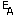
<style>
.page{position:relative;width:16px;height:16px;background:#ffffff}
.page>*{position:absolute;margin:0}
.t1{font:11px "Verdana";color:#000000}
</style>
<div class="page">
<p class="t1" style="left:3px;top:1px;width:5px;height:8px">E</p>
<p class="t1" style="left:7px;top:7px;width:6px;height:8px">A</p>
</div>
